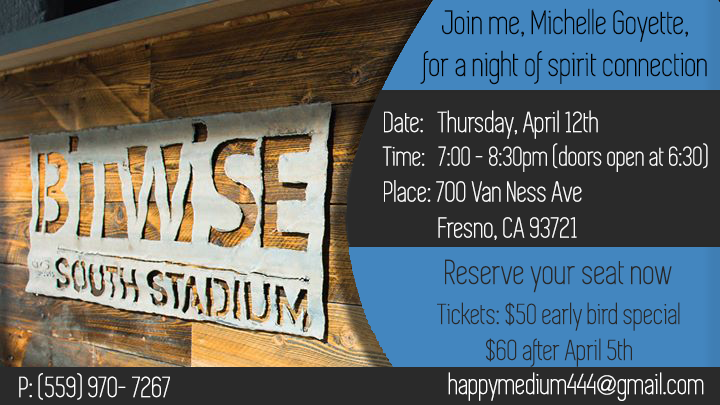
<style>
.page{position:relative;width:720px;height:405px;background:#2a2a2a}
.page>*{position:absolute;margin:0}
.t1{font:35px "Simplifica";color:#030303}
.t2{font:30px "Simplifica";color:#fbfbfb}
.t3{font:28px "Simplifica";color:#fbfbfb}
.t4{font:36px "Simplifica";color:#292929}
.t5{font:30px "Simplifica";color:#292929}
.t6{font:30px "Simplifica";color:#ffffff}
</style>
<div class="page">
<p class="t1" style="left:420px;top:8px;width:287px;height:77px;text-align:center">Join me, Michelle Goyette, <br>for a night of spirit connection</p>
<p class="t2" style="left:382px;top:110px;width:326px;height:130px">Date:   Thursday, April 12th <br><span class="t3">Time:   7:00 - 8:30pm (doors open at 6:30)<br></span>Place: 700 Van Ness Ave<br>     Fresno, CA 93721</p>
<p class="t4" style="left:445px;top:259px;width:227px;height:34px">Reserve your seat now</p>
<p class="t5" style="left:437px;top:302px;width:243px;height:65px;text-align:center">Tickets: $50 early bird special<br>$60 after April 5th</p>
<p class="t6" style="left:19px;top:373px;width:151px;height:27px">P: (559) 970- 7267</p>
<p class="t6" style="left:448px;top:372px;width:256px;height:29px">happymedium444@gmail.com</p>
</div>
